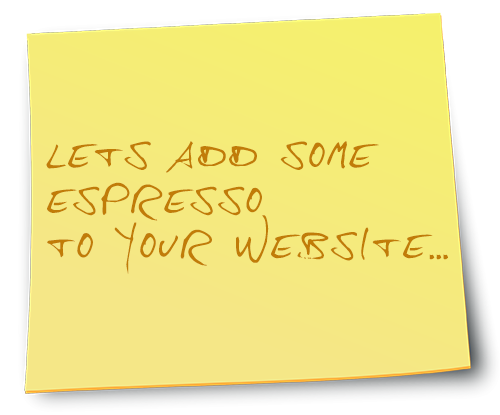
<style>
.page{position:relative;width:500px;height:415px}
.page>*{position:absolute;margin:0}
.t1{font:37.7px "Hanshand";color:#c17c08}
</style>
<div class="page">
<p class="t1" style="left:46px;top:141px;width:402px;height:133px">Lets add some <br>espresso <br>to your website...</p>
</div>
